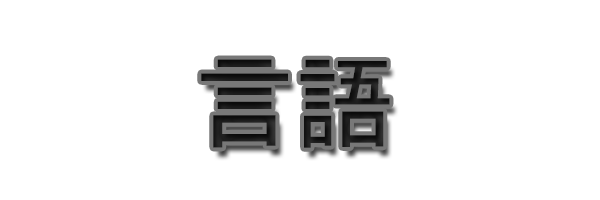
<style>
.page{position:relative;width:600px;height:200px;background:#ffffff}
.page>*{position:absolute;margin:0}
.t1{font:100px "MS-Gothic";color:#171717}
</style>
<div class="page">
<p class="t1" style="left:201px;top:59px;width:189px;height:89px">言語</p>
</div>
